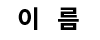
<style>
.page{position:relative;width:100px;height:40px;background:#ffffff}
.page>*{position:absolute;margin:0}
.t1{font:25px "NotoSansCJKkr-Bold";color:#000000}
</style>
<div class="page">
<p class="t1" style="left:18px;top:7px;width:61px;height:23px">이   름</p>
</div>
